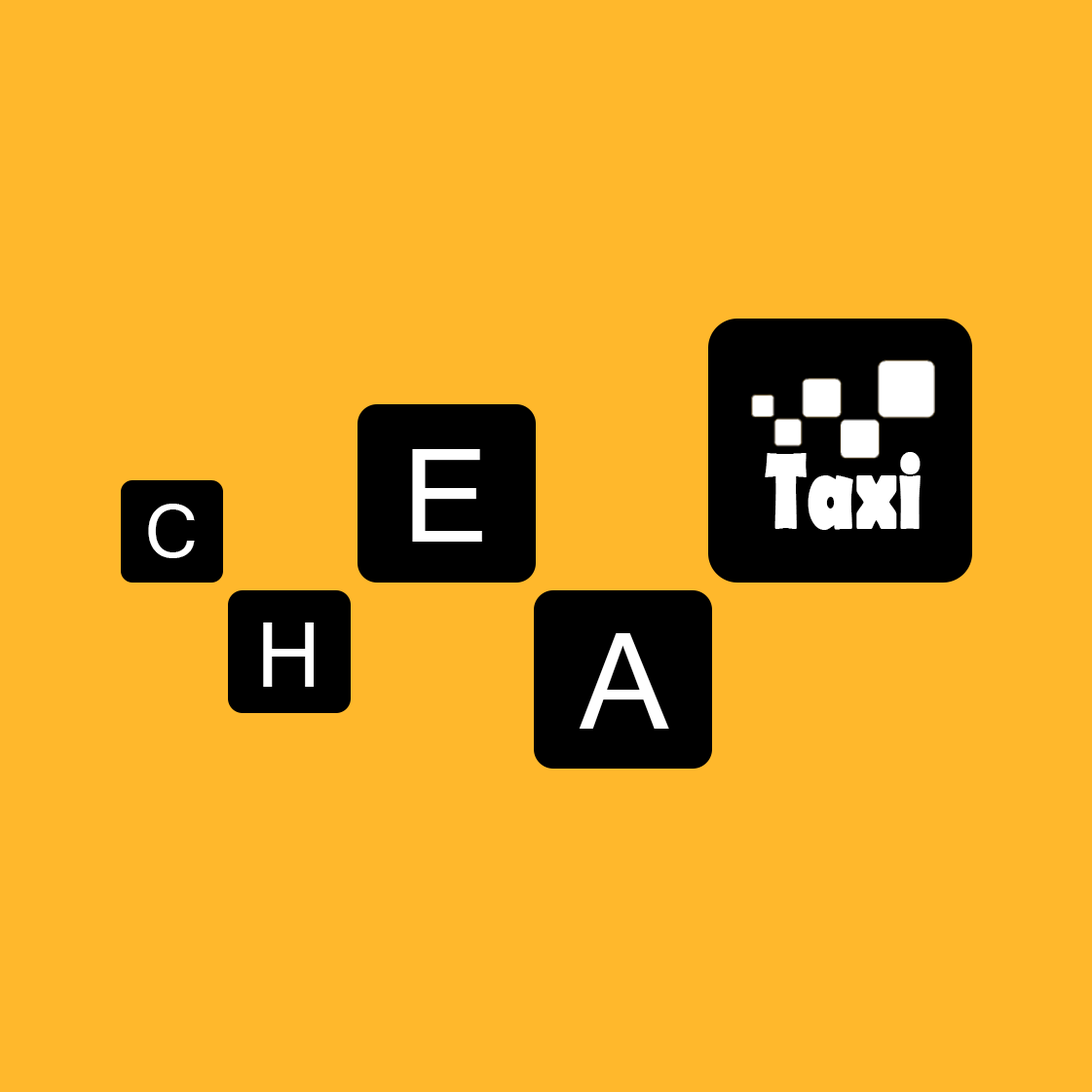
<style>
.page{position:relative;width:1092px;height:1092px;background:#ffb82c}
.page>*{position:absolute;margin:0}
.t1{font:129.9px "MicrosoftSansSerif";color:#ffffff}
.t2{font:109.8px "BerlinSansFB-Bold";color:#ffffff;scale:0.71 1}
.t3{font:73.1px "MicrosoftSansSerif";color:#ffffff}
.t4{font:89.3px "MicrosoftSansSerif";color:#ffffff}
.t5{font:133.9px "MicrosoftSansSerif";color:#ffffff}
</style>
<div class="page">
<p class="t1" style="left:412px;top:449px;width:70px;height:93px">E</p>
<p class="t2" style="left:765px;top:452px;width:156px;height:78px">Taxi</p>
<p class="t3" style="left:148px;top:504px;width:47px;height:54px">С</p>
<p class="t4" style="left:263px;top:622px;width:51px;height:65px">H</p>
<p class="t5" style="left:579px;top:633px;width:90px;height:96px">A</p>
</div>
